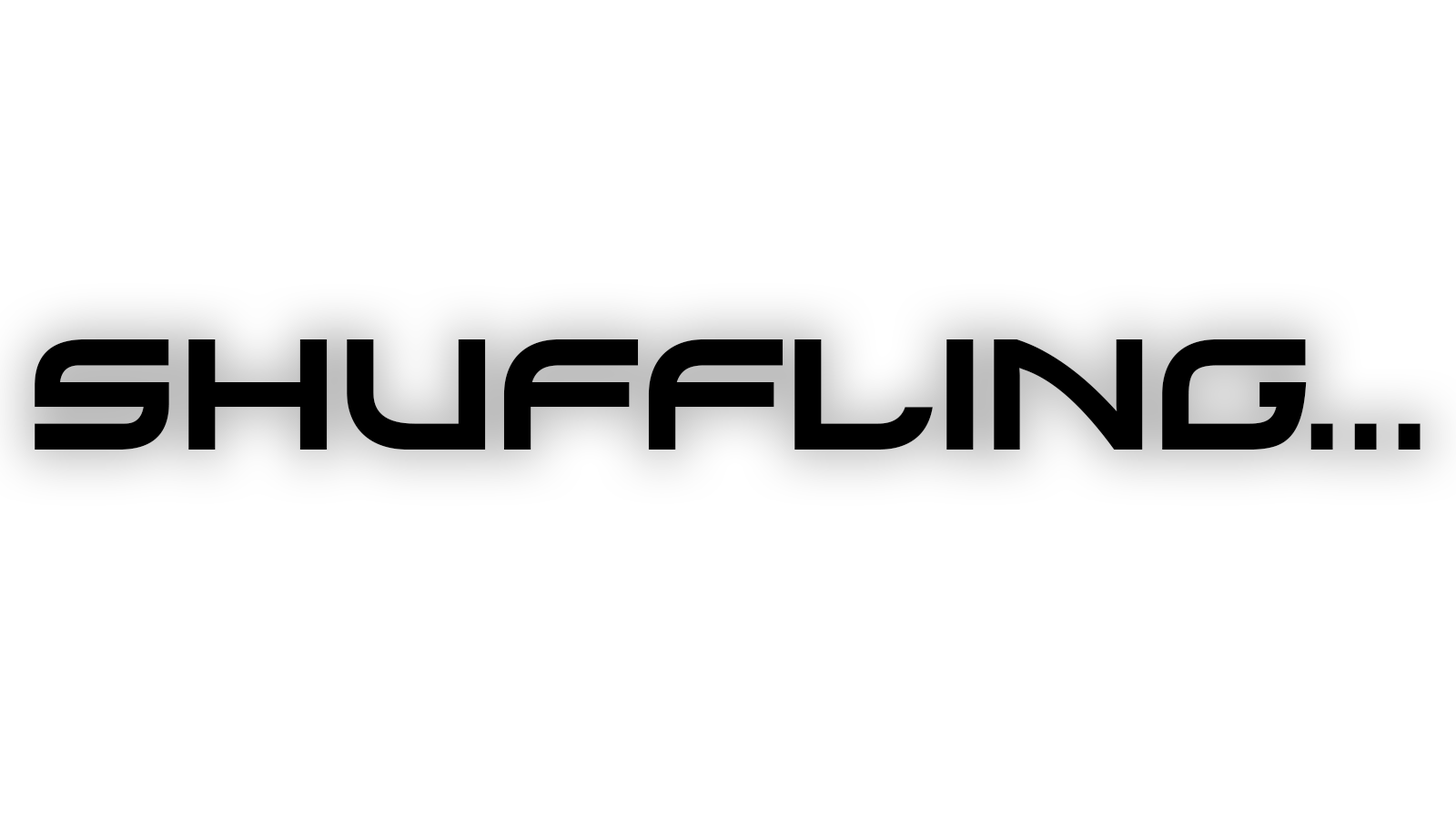
<style>
.page{position:relative;width:1456px;height:819px;background:#ffffff}
.page>*{position:absolute;margin:0}
.t1{font:156.7px "Xirod-Regular";color:#000000}
</style>
<div class="page">
<p class="t1" style="left:35px;top:339px;width:1385px;height:111px">Shuffling...</p>
</div>
